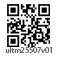
<style>
.page{position:relative;width:57px;height:57px;background:#ffffff}
.page>*{position:absolute;margin:0}
.t1{font:8px "MyriadPro-Regular";color:#666666}
</style>
<div class="page">
<p class="t1" style="left:5px;top:47px;width:47px;height:6px">ultm25507v01</p>
</div>
